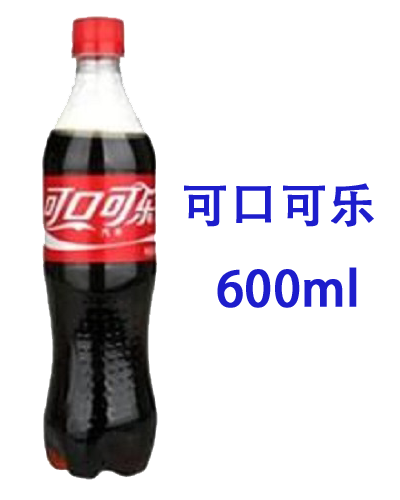
<style>
.page{position:relative;width:400px;height:500px;background:#ffffff}
.page>*{position:absolute;margin:0}
.t1{font:48px "AdobeHeitiStd-Regular";color:#1d1dcc;font-weight:bold}
</style>
<div class="page">
<p class="t1" style="left:184px;top:183px;width:190px;height:125px">可口可乐<br>   600ml</p>
</div>
